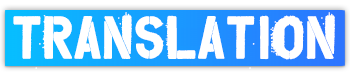
<style>
.page{position:relative;width:350px;height:75px;background:#ffffff}
.page>*{position:absolute;margin:0}
.t1{font:45.8px "Overspray";color:#ffffff;font-weight:bold}
</style>
<div class="page">
<p class="t1" style="left:13px;top:12px;width:322px;height:57px">translation</p>
</div>
